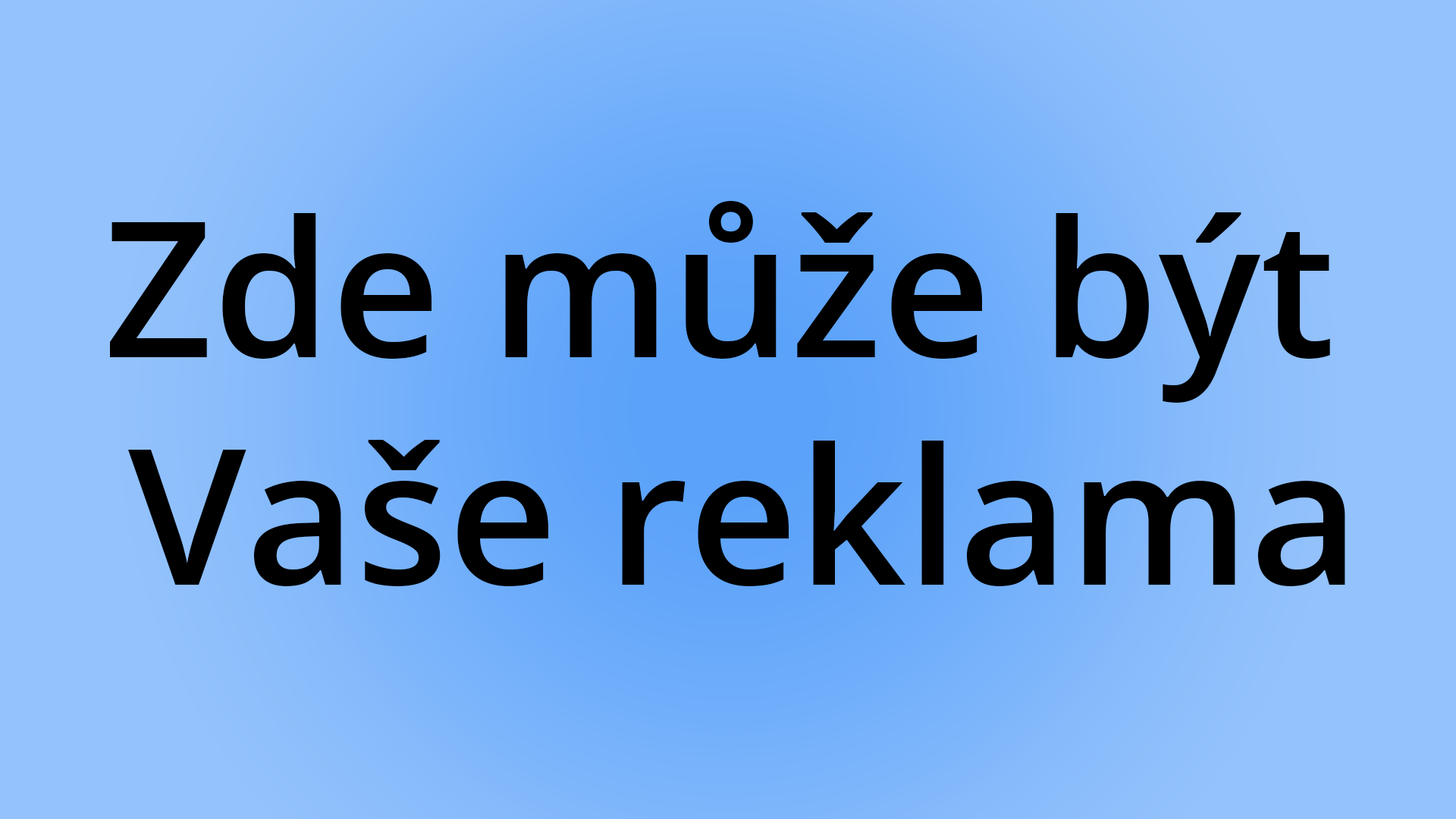
<style>
.page{position:relative;width:1456px;height:819px;background:#93c2fc}
.page>*{position:absolute;margin:0}
.t1{font:189.6px "OpenSans-SemiBold";color:#000000}
</style>
<div class="page">
<p class="t1" style="left:110px;top:201px;width:1235px;height:385px;text-align:center">Zde může být <br>Vaše reklama</p>
</div>
